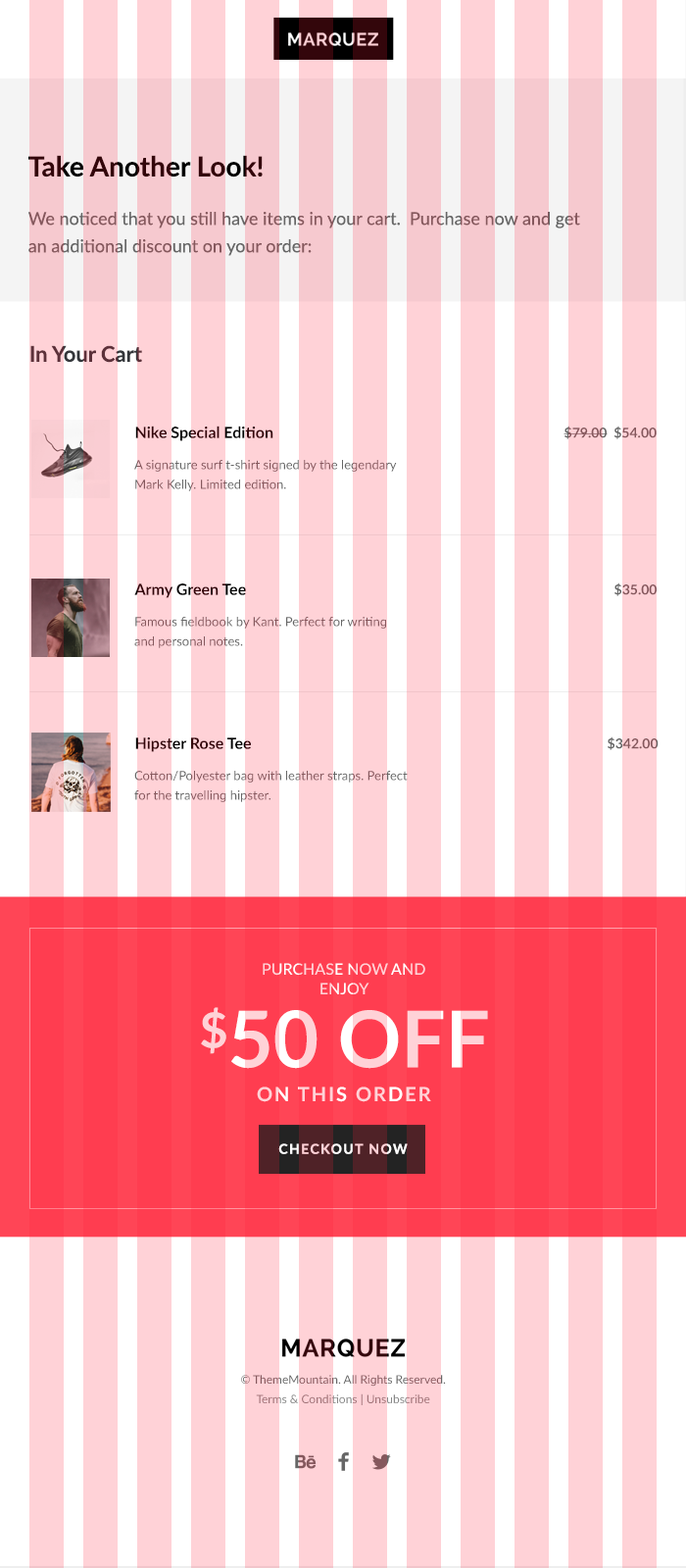
<style>
.page{position:relative;width:686px;height:1568px;background:#ffd2d7}
.page>*{position:absolute;margin:0}
.t1{font:27.5px "Lato-Bold"}
.t2{font:17.7px/27.5px "Lato-Regular"}
.t3{font:21.6px "Lato-Bold"}
.t4{font:15.7px "Lato-Bold"}
.t5{font:13.7px "Lato-Bold";color:#85585d}
.t6{font:12.7px/19.6px "Lato-Regular"}
.t7{font:12.7px/19.6px "Lato-Regular";color:#85585d}
.t8{font:13.7px "Lato-Bold"}
.t9{font:15.7px "Lato-Medium"}
.t10{font:78.4px "Lato-Bold"}
.t11{font:49px "Lato-Bold"}
.t12{font:19.6px "Lato-Bold";letter-spacing:0.1em;color:#ffd2d7}
.t13{font:13.7px "Lato-Bold";letter-spacing:0.1em}
.t14{font:11.8px/19.6px "Lato-Regular";color:#666666}
.t15{font:11.8px/19.6px "Lato-Regular";color:#888888}
</style>
<div class="page">
<p class="t1" style="left:28px;top:155px;width:235px;height:22px">Take Another Look!</p>
<p class="t2" style="left:28px;top:212px;width:553px;height:44px">We noticed that you still have items in your cart.  Purchase now and get an additional discount on your order:</p>
<p class="t3" style="left:30px;top:345px;width:112px;height:18px">In Your Cart</p>
<p class="t4" style="left:135px;top:426px;width:139px;height:15px">Nike Special Edition</p>
<p class="t5" style="left:564px;top:426px;width:93px;height:13px">$79.00  $54.00</p>
<p class="t6" style="left:134px;top:460px;width:263px;height:31px;text-align:justify">A signature surf t-shirt signed by the legendary<br>Mark Kelly. Limited edition.</p>
<p class="t4" style="left:134px;top:583px;width:112px;height:15px">Army Green Tee</p>
<p class="t5" style="left:615px;top:582px;width:42px;height:14px">$35.00</p>
<p class="t7" style="left:134px;top:617px;width:252px;height:31px;text-align:justify">Famous fieldbook by Kant. Perfect for writing<br>and personal notes.</p>
<p class="t4" style="left:135px;top:737px;width:116px;height:15px">Hipster Rose Tee</p>
<p class="t8" style="left:608px;top:736px;width:51px;height:14px">$342.00</p>
<p class="t6" style="left:134px;top:771px;width:274px;height:31px;text-align:justify">Cotton/Polyester bag with leather straps. Perfect<br>for the travelling hipster.</p>
<p class="t9" style="left:263px;top:963px;width:163px;height:13px">PURCHASE NOW AND</p>
<p class="t9" style="left:321px;top:983px;width:49px;height:12px">ENJOY</p>
<p class="t10" style="left:201px;top:1007px;width:287px;height:62px"><span class="t11">$</span>50 OFF</p>
<p class="t12" style="left:257px;top:1087px;width:174px;height:15px">ON THIS ORDER</p>
<p class="t13" style="left:278px;top:1143px;width:130px;height:11px">CHECKOUT NOW</p>
<p class="t14" style="left:241px;top:1375px;width:205px;height:30px;text-align:center">© ThemeMountain. All Rights Reserved. <br><span class="t15">Terms &amp; Conditions | Unsubscribe</span></p>
</div>
